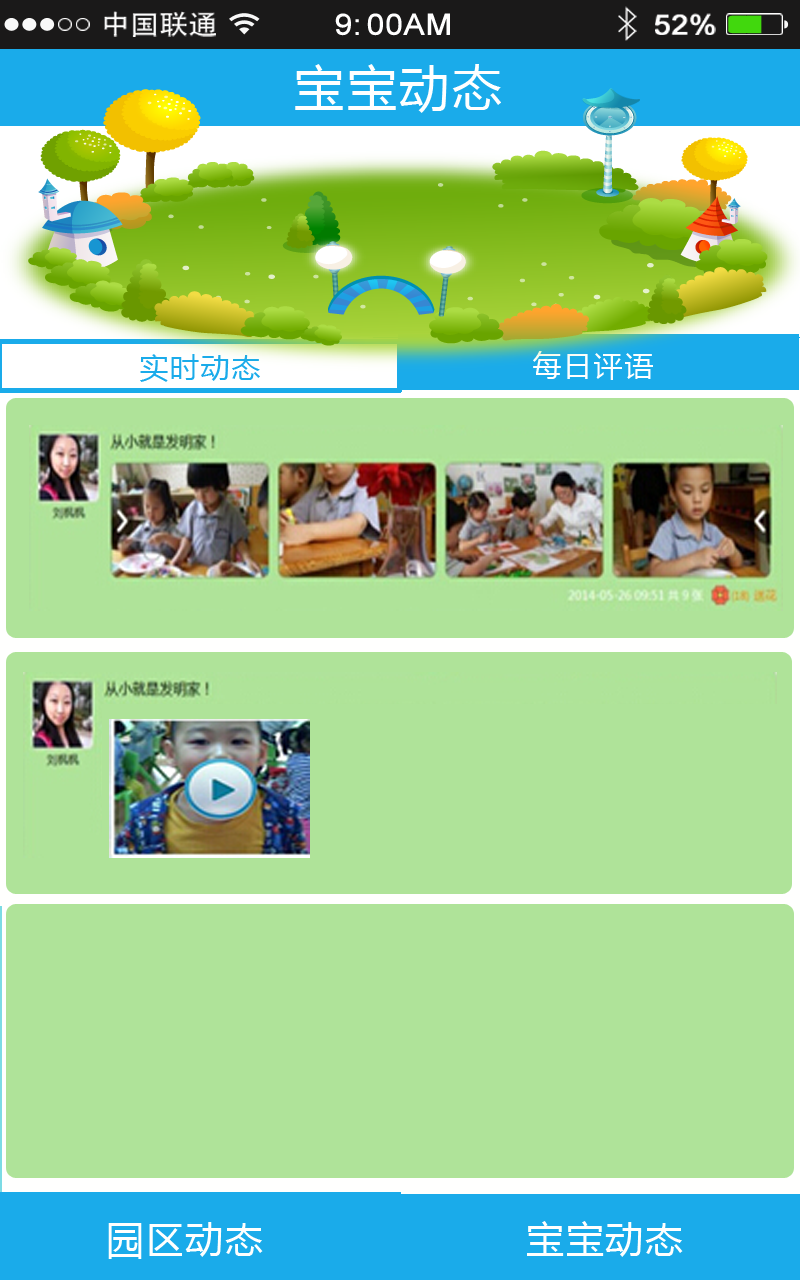
<style>
.page{position:relative;width:800px;height:1280px;background:#afe399}
.page>*{position:absolute;margin:0}
.t1{font:26.8px "AdobeHeitiStd-Regular";color:#ffffff;scale:1.09 1}
.t2{font:29.2px "ArialMT";color:#ffffff;font-weight:bold;scale:1.09 1}
.t3{font:28px "ArialMT";color:#ffffff;font-weight:bold;scale:1.09 1}
.t4{font:50px "MicrosoftYaHei";letter-spacing:0.05em;color:#ffffff}
.t5{font:29.2px "MicrosoftYaHei";letter-spacing:0.05em;color:#ffffff}
.t6{font:29.2px "MicrosoftYaHei";letter-spacing:0.05em;color:#1aabea}
.t7{font:37.5px "MicrosoftYaHei";letter-spacing:0.05em;color:#fffffe}
</style>
<div class="page">
<p class="t1" style="left:104px;top:11px;width:112px;height:26px">中国联通</p>
<p class="t2" style="left:335px;top:13px;width:115px;height:23px">9:00AM</p>
<p class="t3" style="left:655px;top:13px;width:61px;height:22px">52%</p>
<p class="t4" style="left:295px;top:64px;width:206px;height:49px">宝宝动态</p>
<p class="t5" style="left:533px;top:351px;width:120px;height:29px">每日评语</p>
<p class="t6" style="left:140px;top:354px;width:120px;height:28px">实时动态</p>
<p class="t7" style="left:108px;top:1222px;width:155px;height:37px">园区动态</p>
<p class="t7" style="left:527px;top:1221px;width:156px;height:36px">宝宝动态</p>
</div>
